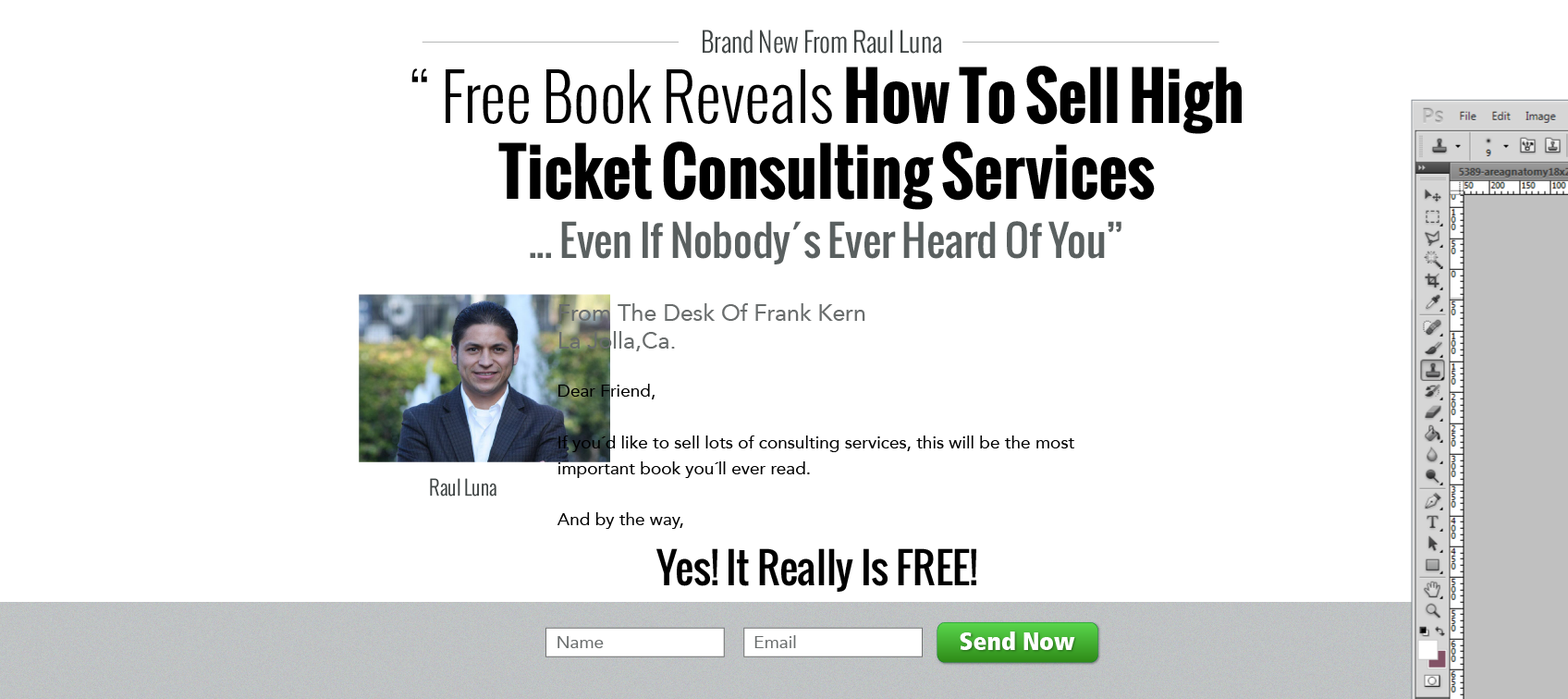
<style>
.page{position:relative;width:1568px;height:699px;background:#ffffff}
.page>*{position:absolute;margin:0}
.t1{font:26.8px "Oswald-Light";color:#3f4444}
.t2{font:63.8px "Oswald-Bold";color:#000000}
.t3{font:63.8px "Oswald-Light";color:#000000}
.t4{font:41.5px "Oswald";color:#5a6060}
.t5{font:23.1px "AvenirLT-Roman";color:#696d6d}
.t6{font:17.6px "AvenirLT-Roman";color:#000000}
.t7{font:20.1px "Oswald-Light";color:#3f4444}
.t8{font:41.5px "Oswald";color:#000000}
.t9{font:17.6px "AvenirLT-Roman";color:#696d6d}
.t10{font:24.8px "FrutigerLT-ExtraBlackCn";color:#ffffff}
</style>
<div class="page">
<p class="t1" style="left:703px;top:30px;width:239px;height:24px">Brand New From Raul Luna</p>
<p class="t2" style="left:411px;top:66px;width:831px;height:144px;text-align:center"><span class="t3">“ Free Book Reveals </span>How To Sell High<br>Ticket Consulting Services</p>
<p class="t4" style="left:530px;top:221px;width:591px;height:43px">... Even If Nobody´s Ever Heard Of You”</p>
<p class="t5" style="left:559px;top:303px;width:306px;height:48px">From The Desk Of Frank Kern<br>La Jolla,Ca.</p>
<p class="t6" style="left:557px;top:384px;width:517px;height:94px">Dear Friend,<br><br>If you´d like to sell lots of consulting services, this will be the most<br>important book you´ll ever read.</p>
<p class="t7" style="left:430px;top:478px;width:66px;height:18px">Raul Luna</p>
<p class="t6" style="left:557px;top:512px;width:126px;height:17px">And by the way,</p>
<p class="t8" style="left:656px;top:548px;width:320px;height:44px">Yes! It Really Is FREE!</p>
<p class="t9" style="left:557px;top:636px;width:47px;height:12px">Name</p>
<p class="t9" style="left:754px;top:635px;width:42px;height:13px">Email</p>
<p class="t10" style="left:960px;top:631px;width:115px;height:19px">Send Now</p>
</div>
